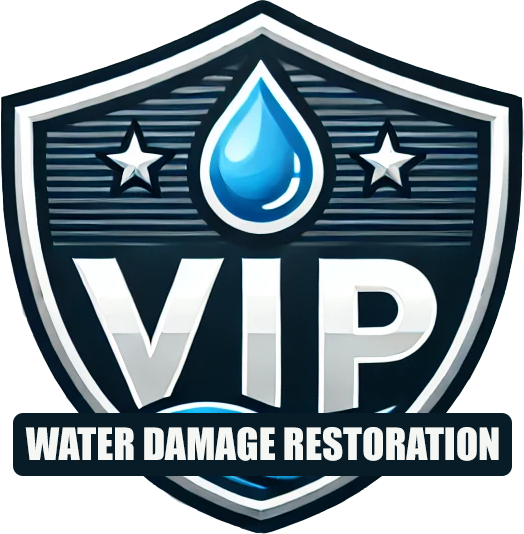
<style>
.page{position:relative;width:524px;height:534px;background:#ffffff}
.page>*{position:absolute;margin:0}
.t1{font:41px "Impact";color:#f4f7f4}
</style>
<div class="page">
<p class="t1" style="left:25px;top:427px;width:474px;height:34px">WATER DAMAGE RESTORATION</p>
</div>
